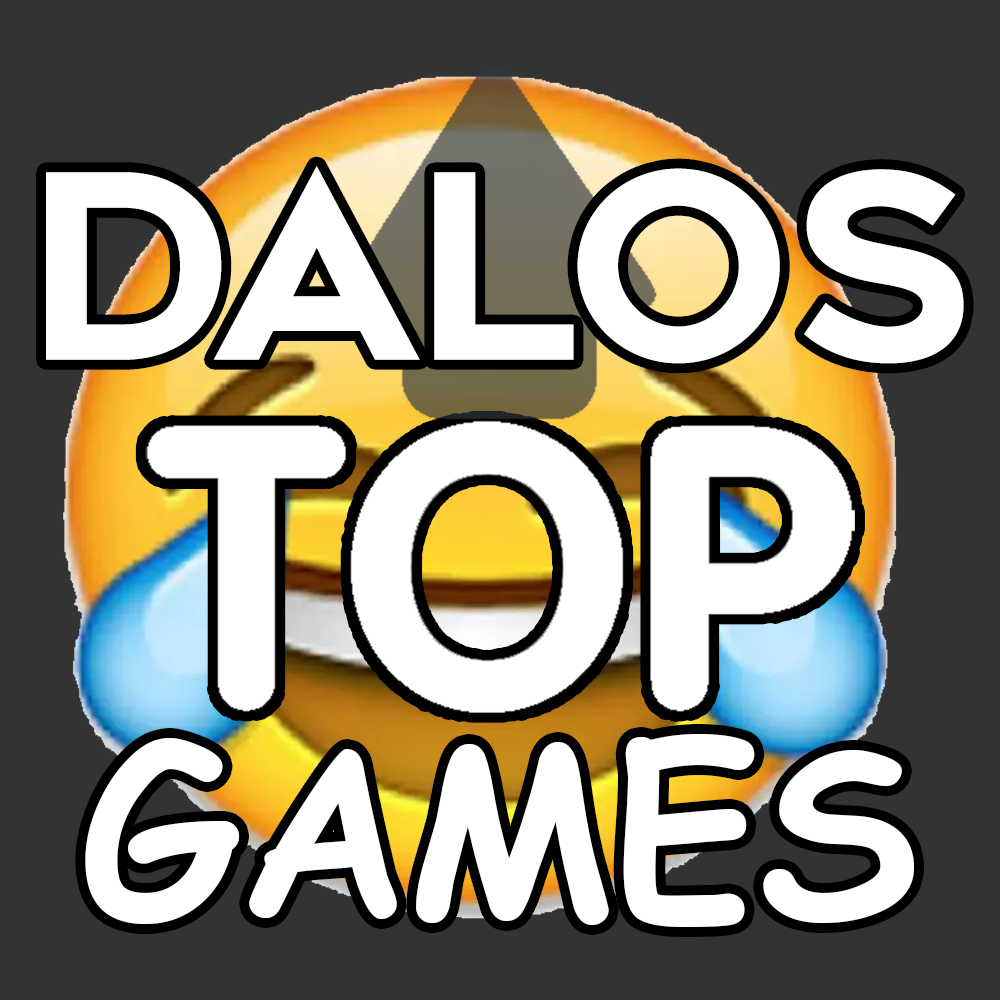
<style>
.page{position:relative;width:1000px;height:1000px;background:#333333}
.page>*{position:absolute;margin:0}
.t1{font:256.3px "Renogare-Regular";color:#ffffff}
.t2{font:232px "ComicSansMS-Bold";color:#ffffff}
</style>
<div class="page">
<p class="t1" style="left:46px;top:166px;width:918px;height:198px">DALOS</p>
<p class="t2" style="left:85px;top:734px;width:829px;height:193px">GAMES</p>
</div>
